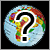
<style>
.page{position:relative;width:50px;height:50px;background:#000000}
.page>*{position:absolute;margin:0}
.t1{font:40px "ArialMT";color:#000000}
</style>
<div class="page">
<p class="t1" style="left:16px;top:12px;width:19px;height:29px">?</p>
</div>
